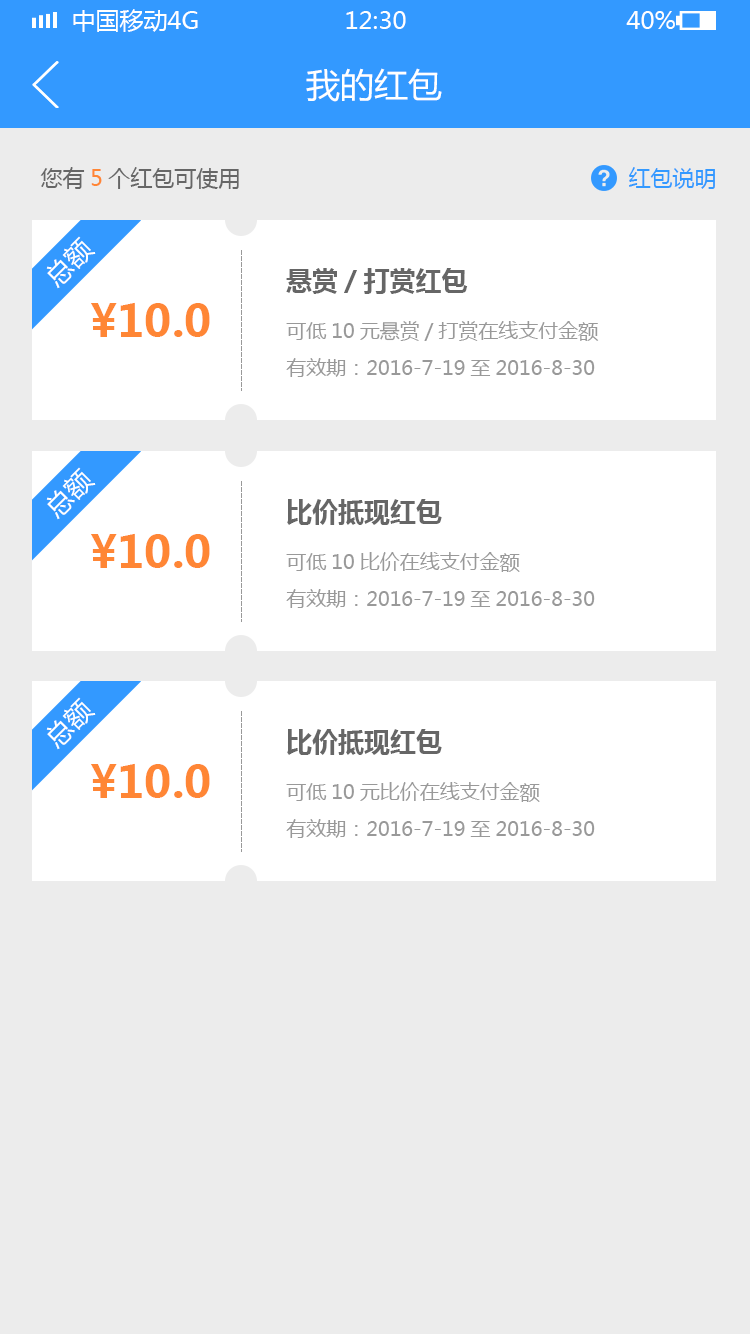
<style>
.page{position:relative;width:750px;height:1334px;background:#ececec}
.page>*{position:absolute;margin:0}
.t1{font:24px "MicrosoftYaHei";color:#ffffff;text-transform:uppercase}
.t2{font:34px "MicrosoftYaHei";color:#ffffff}
.t3{font:22px "MicrosoftYaHei";color:#666666}
.t4{font:22px "MicrosoftYaHei";color:#ff8635}
.t5{font:22px "MicrosoftYaHei";color:#3399ff}
.t6{font:26px "MicrosoftYaHei";color:#ffffff}
.t7{font:26px "MicrosoftYaHei-Bold";color:#666666}
.t8{font:44px "MicrosoftYaHei-Bold";color:#ff8635}
.t9{font:20px "MicrosoftYaHei";color:#999999}
</style>
<div class="page">
<p class="t1" style="left:73px;top:9px;width:125px;height:23px">中国移动4G</p>
<p class="t1" style="left:346px;top:11px;width:60px;height:18px">12:30</p>
<p class="t1" style="left:626px;top:11px;width:49px;height:18px">40%</p>
<p class="t2" style="left:306px;top:68px;width:136px;height:34px">我的红包</p>
<p class="t3" style="left:40px;top:167px;width:199px;height:22px">您有<span class="t4">5</span>个红包可使用</p>
<p class="t5" style="left:629px;top:167px;width:86px;height:22px">红包说明</p>
<p class="t6" style="left:46px;top:236px;width:50px;height:53px;rotate:-45deg">总额</p>
<p class="t7" style="left:286px;top:268px;width:182px;height:26px">悬赏/打赏红包</p>
<p class="t8" style="left:91px;top:302px;width:119px;height:35px">¥10.0</p>
<p class="t9" style="left:286px;top:321px;width:313px;height:20px">可低10元悬赏/打赏在线支付金额</p>
<p class="t9" style="left:286px;top:358px;width:309px;height:19px">有效期：2016-7-19至2016-8-30</p>
<p class="t6" style="left:46px;top:467px;width:50px;height:53px;rotate:-45deg">总额</p>
<p class="t7" style="left:287px;top:499px;width:155px;height:26px">比价抵现红包</p>
<p class="t8" style="left:91px;top:533px;width:119px;height:35px">¥10.0</p>
<p class="t9" style="left:286px;top:552px;width:234px;height:20px">可低10比价在线支付金额</p>
<p class="t9" style="left:286px;top:589px;width:309px;height:19px">有效期：2016-7-19至2016-8-30</p>
<p class="t6" style="left:46px;top:697px;width:50px;height:53px;rotate:-45deg">总额</p>
<p class="t7" style="left:287px;top:729px;width:155px;height:26px">比价抵现红包</p>
<p class="t8" style="left:91px;top:763px;width:119px;height:35px">¥10.0</p>
<p class="t9" style="left:286px;top:782px;width:254px;height:20px">可低10元比价在线支付金额</p>
<p class="t9" style="left:286px;top:819px;width:309px;height:19px">有效期：2016-7-19至2016-8-30</p>
</div>
